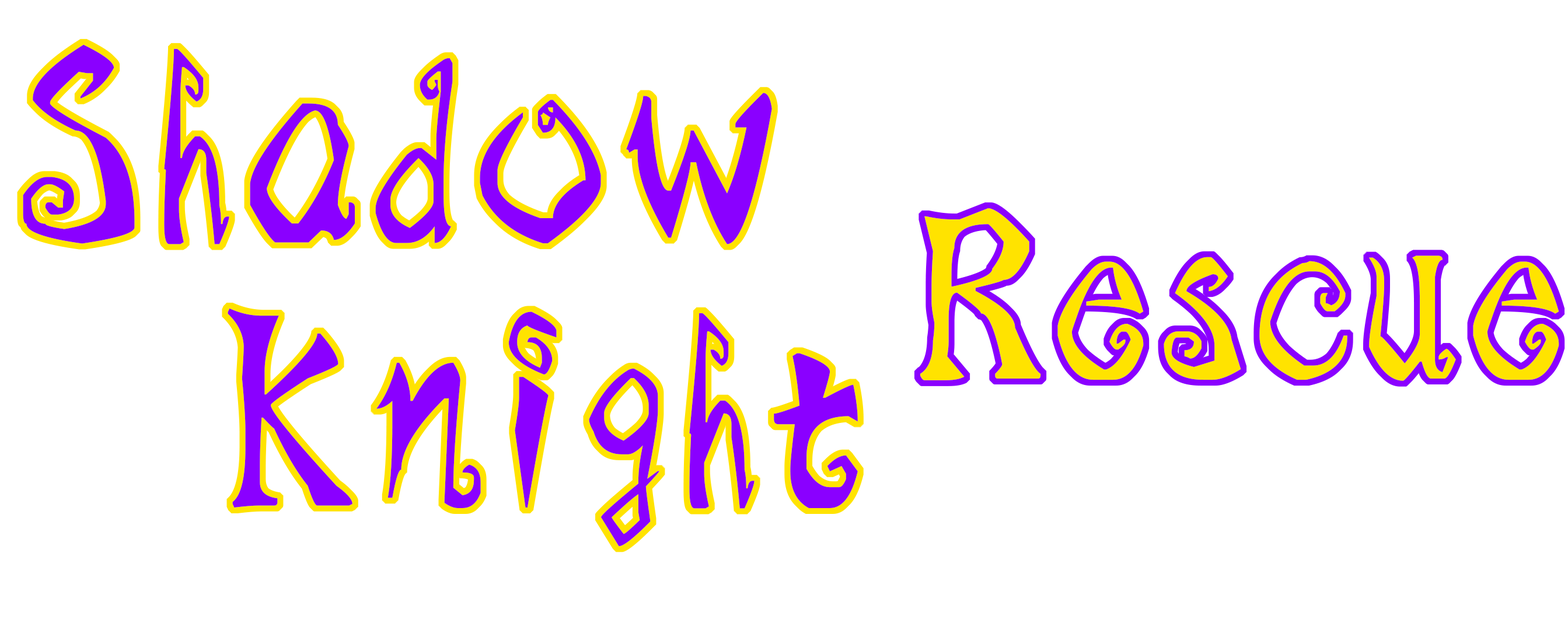
<style>
.page{position:relative;width:1568px;height:630px;background:#ffffff}
.page>*{position:absolute;margin:0}
.t1{font:278.5px "HYDiWRGJ";color:#8a00ff}
.t2{font:236.3px "HYDiWRGJ";color:#ffe300}
</style>
<div class="page">
<p class="t1" style="left:23px;top:44px;width:749px;height:201px">Shadow</p>
<p class="t2" style="left:920px;top:208px;width:639px;height:173px">Rescue</p>
<p class="t1" style="left:228px;top:308px;width:630px;height:239px">Knight</p>
</div>
